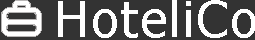
<style>
.page{position:relative;width:255px;height:40px;background:#333333}
.page>*{position:absolute;margin:0}
.t1{font:49px "Verdana";color:#ffffff}
</style>
<div class="page">
<p class="t1" style="left:58px;top:0px;width:198px;height:38px">HoteliCo</p>
</div>
